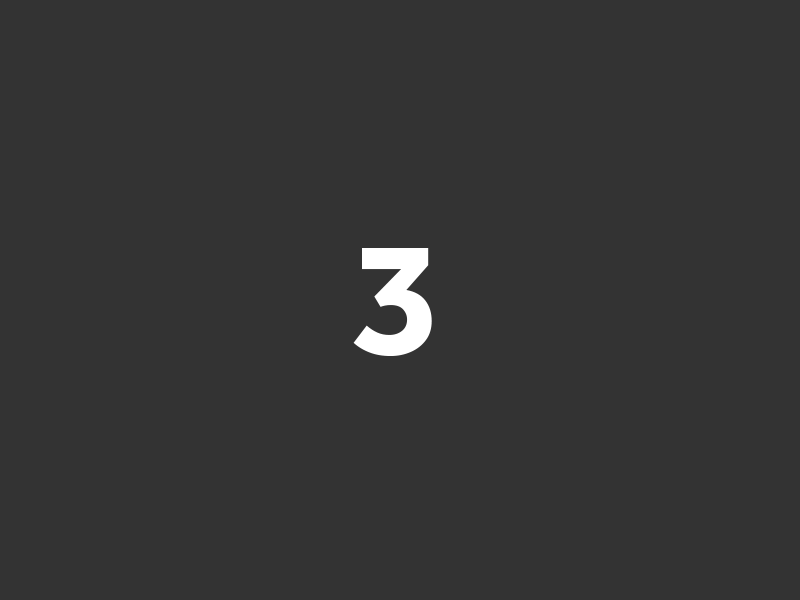
<style>
.page{position:relative;width:800px;height:600px;background:#333333}
.page>*{position:absolute;margin:0}
.t1{font:166.7px "Effra-Bold";color:#ffffff}
</style>
<div class="page">
<p class="t1" style="left:353px;top:248px;width:79px;height:108px">3</p>
</div>
